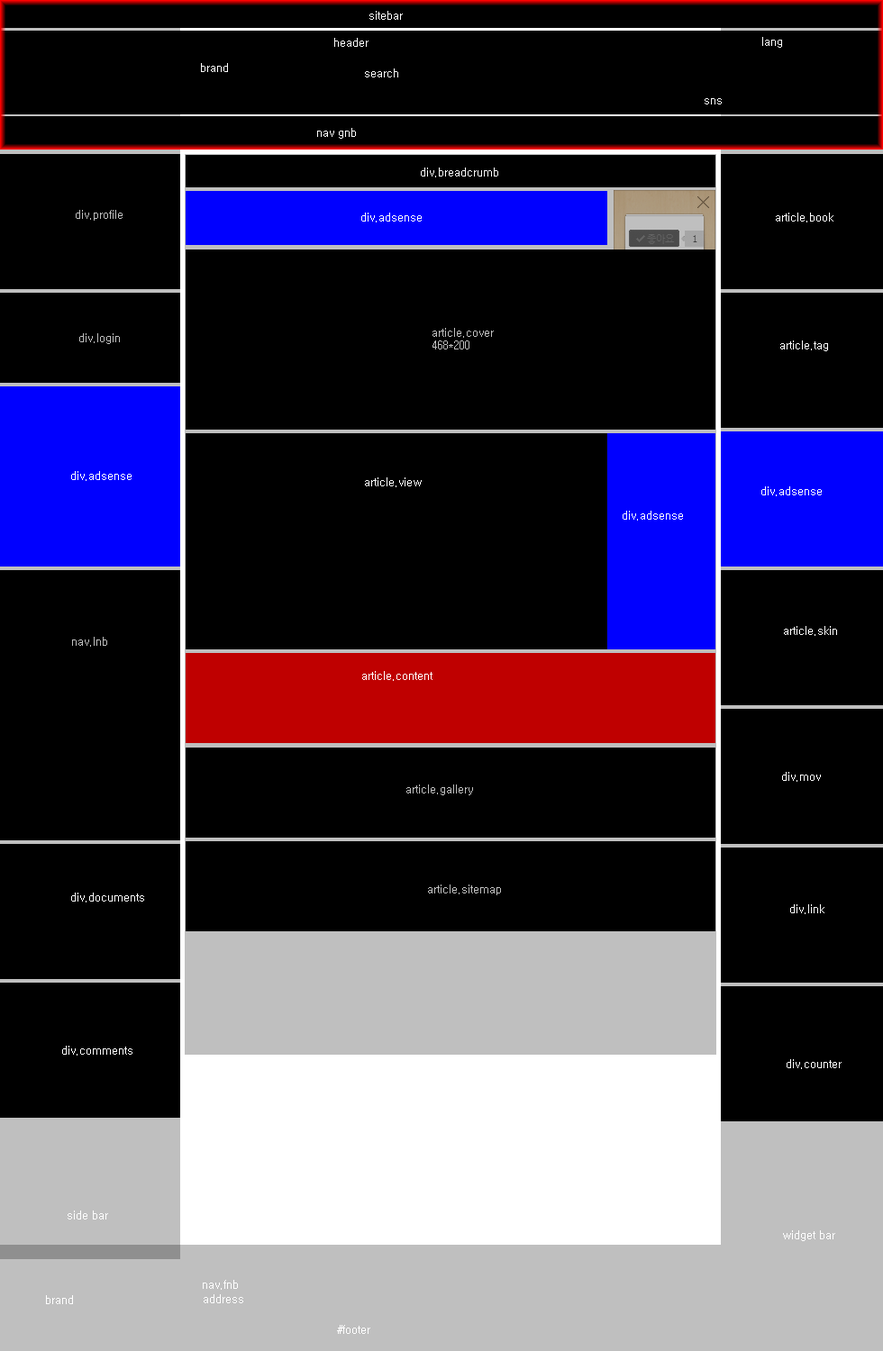
<style>
.page{position:relative;width:883px;height:1351px;background:#000000}
.page>*{position:absolute;margin:0}
.t1{font:10.8px "Gulim";color:#ffffff}
.t2{font:10.8px "Gulim";color:#bfbfbf}
</style>
<div class="page">
<p class="t1" style="left:369px;top:11px;width:34px;height:9px">sitebar</p>
<p class="t1" style="left:334px;top:38px;width:34px;height:9px">header</p>
<p class="t1" style="left:762px;top:37px;width:20px;height:11px">lang</p>
<p class="t1" style="left:201px;top:63px;width:27px;height:9px">brand</p>
<p class="t1" style="left:365px;top:68px;width:33px;height:9px">search</p>
<p class="t1" style="left:704px;top:98px;width:17px;height:6px">sns</p>
<p class="t1" style="left:317px;top:128px;width:39px;height:11px">nav gnb</p>
<p class="t1" style="left:421px;top:168px;width:77px;height:9px">div.breadcrumb</p>
<p class="t2" style="left:76px;top:210px;width:46px;height:11px">div.profile</p>
<p class="t1" style="left:361px;top:213px;width:61px;height:9px">div.adsense</p>
<p class="t1" style="left:775px;top:213px;width:58px;height:9px">article.book</p>
<p class="t2" style="left:432px;top:328px;width:62px;height:21px">article.cover<br>468*200</p>
<p class="t2" style="left:79px;top:333px;width:41px;height:11px">div.login</p>
<p class="t1" style="left:780px;top:340px;width:48px;height:11px">article.tag</p>
<p class="t1" style="left:71px;top:471px;width:60px;height:10px">div.adsense</p>
<p class="t1" style="left:365px;top:477px;width:57px;height:10px">article.view</p>
<p class="t1" style="left:761px;top:486px;width:60px;height:10px">div.adsense</p>
<p class="t1" style="left:622px;top:511px;width:61px;height:10px">div.adsense</p>
<p class="t1" style="left:784px;top:626px;width:53px;height:10px">article.skin</p>
<p class="t2" style="left:72px;top:637px;width:35px;height:10px">nav.lnb</p>
<p class="t1" style="left:362px;top:671px;width:70px;height:10px">article.content</p>
<p class="t1" style="left:782px;top:772px;width:38px;height:10px">div.mov</p>
<p class="t2" style="left:406px;top:784px;width:67px;height:11px">article.gallery</p>
<p class="t1" style="left:71px;top:893px;width:73px;height:9px">div.documents</p>
<p class="t2" style="left:428px;top:884px;width:73px;height:11px">article.sitemap</p>
<p class="t1" style="left:790px;top:904px;width:34px;height:10px">div.link</p>
<p class="t1" style="left:62px;top:1046px;width:70px;height:10px">div.comments</p>
<p class="t1" style="left:786px;top:1059px;width:55px;height:10px">div.counter</p>
<p class="t1" style="left:68px;top:1210px;width:40px;height:9px">side bar</p>
<p class="t1" style="left:783px;top:1230px;width:52px;height:11px">widget bar</p>
<p class="t1" style="left:203px;top:1280px;width:35px;height:10px">nav.fnb</p>
<p class="t1" style="left:46px;top:1295px;width:27px;height:9px">brand</p>
<p class="t1" style="left:204px;top:1294px;width:39px;height:9px">address</p>
<p class="t1" style="left:337px;top:1325px;width:33px;height:9px">#footer</p>
</div>
